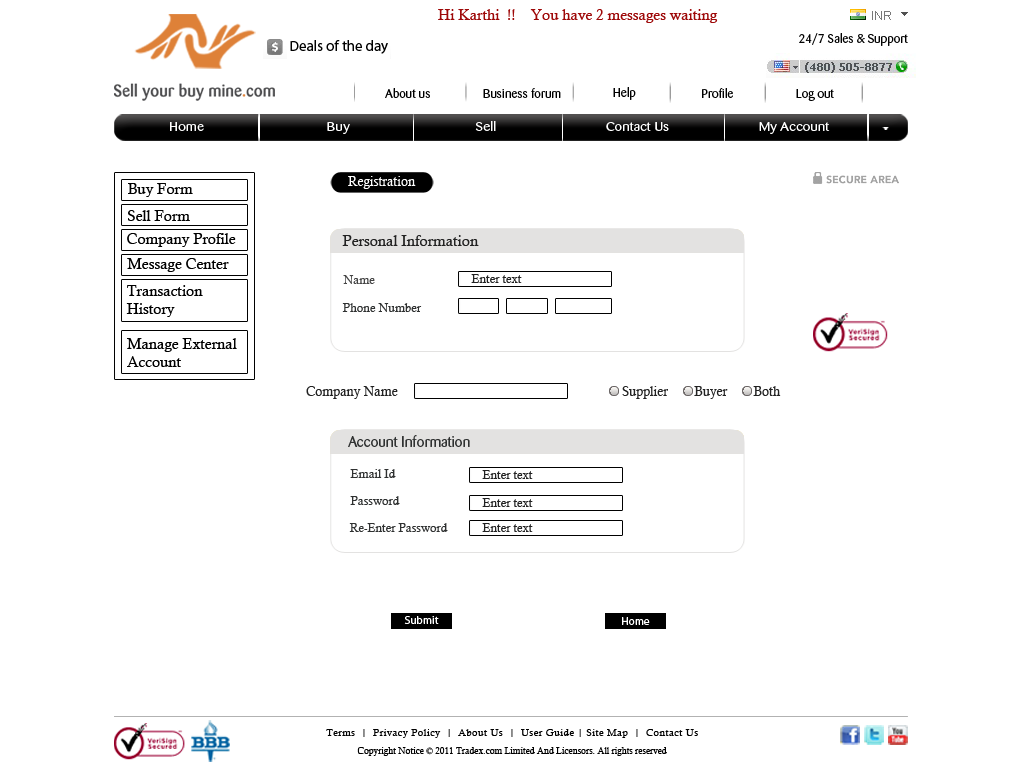
<style>
.page{position:relative;width:1024px;height:768px;background:#ffffff}
.page>*{position:absolute;margin:0}
.t1{font:15px "CalistoMT";color:#9e0909}
.t2{font:14.9px "MyriadPro-Regular";color:#000000}
.t3{font:12px "Barmeno-Regular";color:#030303;scale:1.05 1}
.t4{font:12px "Barmeno-Regular";color:#000000;scale:1.05 1}
.t5{font:12.1px "Barmeno-Regular";color:#ffffff;scale:1.2 1}
.t6{font:15px "CalistoMT";color:#000000}
.t7{font:13px "CalistoMT";color:#ffffff}
.t8{font:15px "CalistoMT";color:#222222}
.t9{font:12px "CalistoMT";color:#454545}
.t10{font:12px "CalistoMT";color:#222222}
.t11{font:12px "CalistoMT";color:#2f3131}
.t12{font:13px "CalistoMT";color:#222222}
.t13{font:15px "Barmeno-Regular";color:#2f3131}
.t14{font:11px "MyriadPro-Regular";color:#ffffff}
.t15{font:10px/18px "CalistoMT";letter-spacing:0.045em;color:#000000}
.t16{font:9px/18px "CalistoMT";color:#000000}
</style>
<div class="page">
<p class="t1" style="left:438px;top:9px;width:280px;height:14px">Hi Karthi  !!    You have 2 messages waiting</p>
<p class="t2" style="left:290px;top:40px;width:98px;height:14px">Deals of the day</p>
<p class="t3" style="left:799px;top:33px;width:109px;height:13px">24/7 Sales &amp; Support</p>
<p class="t4" style="left:385px;top:88px;width:45px;height:10px">About us</p>
<p class="t4" style="left:483px;top:88px;width:78px;height:10px">Business forum</p>
<p class="t4" style="left:613px;top:87px;width:23px;height:13px">Help</p>
<p class="t4" style="left:702px;top:88px;width:31px;height:10px">Profile</p>
<p class="t4" style="left:796px;top:89px;width:38px;height:12px">Log out</p>
<p class="t5" style="left:170px;top:121px;width:660px;height:13px">Home                                     Buy                                      Sell                                 Contact Us                           My Account</p>
<p class="t6" style="left:128px;top:183px;width:65px;height:14px">Buy Form</p>
<p class="t7" style="left:348px;top:176px;width:68px;height:13px">Registration</p>
<p class="t6" style="left:128px;top:210px;width:62px;height:11px">Sell Form</p>
<p class="t6" style="left:127px;top:233px;width:109px;height:14px">Company Profile</p>
<p class="t8" style="left:342px;top:235px;width:137px;height:11px">Personal Information</p>
<p class="t6" style="left:127px;top:258px;width:102px;height:14px">Message Center</p>
<p class="t9" style="left:343px;top:275px;width:32px;height:9px">Name</p>
<p class="t10" style="left:471px;top:274px;width:51px;height:9px">Enter text</p>
<p class="t6" style="left:126px;top:285px;width:77px;height:32px">Transaction<br>History</p>
<p class="t11" style="left:342px;top:303px;width:80px;height:9px">Phone Number</p>
<p class="t6" style="left:127px;top:338px;width:110px;height:29px">Manage External<br>Account</p>
<p class="t12" style="left:306px;top:386px;width:92px;height:13px">Company Name</p>
<p class="t12" style="left:622px;top:386px;width:159px;height:13px">Supplier        Buyer        Both</p>
<p class="t13" style="left:348px;top:435px;width:122px;height:12px">Account Information</p>
<p class="t11" style="left:350px;top:469px;width:46px;height:9px">Email Id</p>
<p class="t10" style="left:482px;top:470px;width:51px;height:9px">Enter text</p>
<p class="t11" style="left:350px;top:496px;width:50px;height:9px">Password</p>
<p class="t10" style="left:482px;top:498px;width:51px;height:9px">Enter text</p>
<p class="t11" style="left:349px;top:523px;width:99px;height:9px">Re-Enter Password</p>
<p class="t10" style="left:482px;top:523px;width:51px;height:9px">Enter text</p>
<p class="t14" style="left:404px;top:616px;width:35px;height:8px">Submit</p>
<p class="t14" style="left:622px;top:617px;width:28px;height:8px">Home</p>
<p class="t15" style="left:326px;top:729px;width:372px;height:27px;text-align:center">Terms  |  Privacy Policy  |  About Us  |  User Guide | Site Map  |  Contact Us<br><span class="t16">Copyright Notice © 2011 Tradex.com Limited And Licensors. All rights reserved</span></p>
</div>
